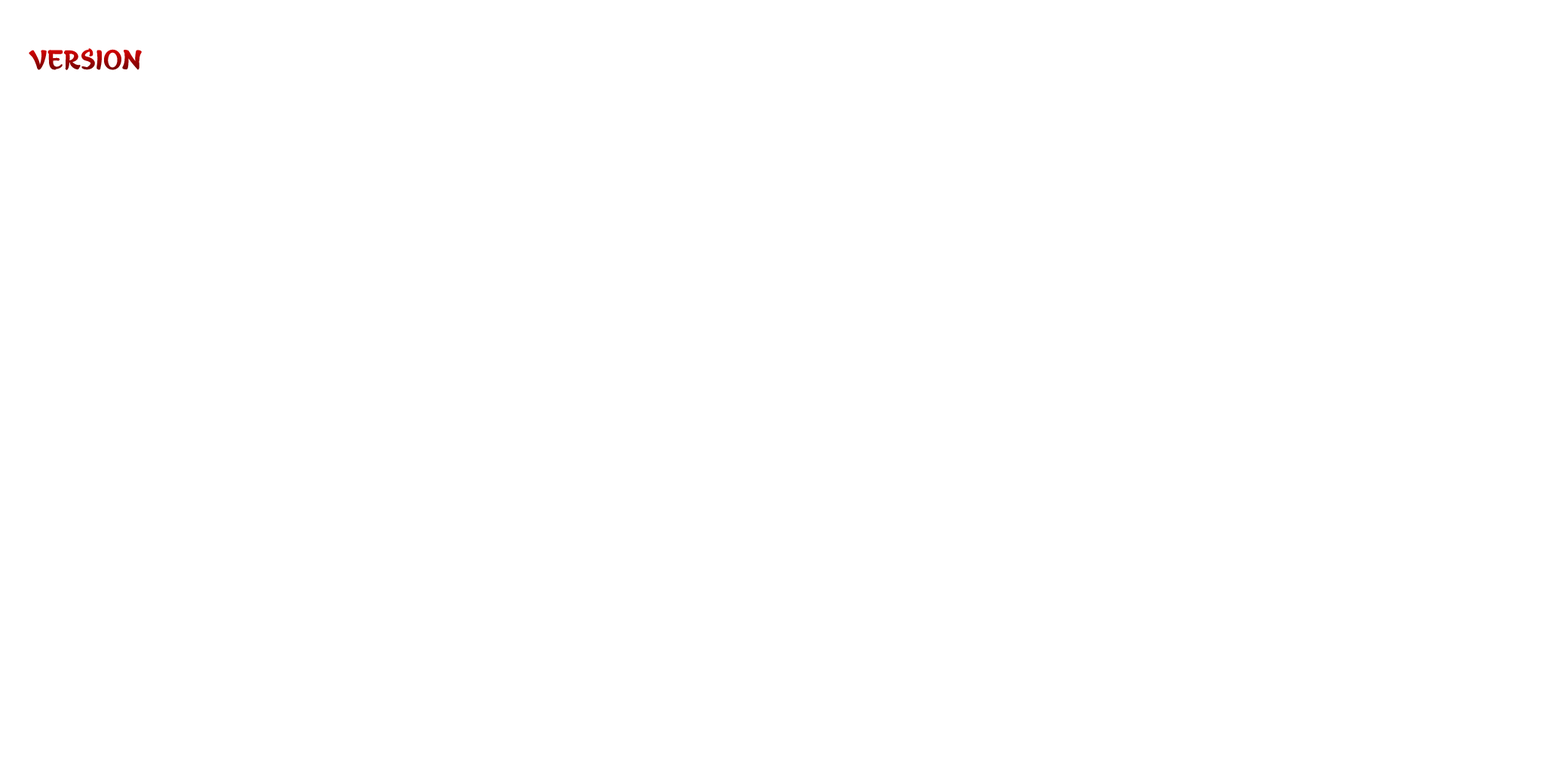
<style>
.page{position:relative;width:1544px;height:772px;background:#ffffff}
.page>*{position:absolute;margin:0}
.t1{font:38.8px "HIROMISAKERegular";letter-spacing:0.05em;font-variant:small-caps;font-weight:bold}
</style>
<div class="page">
<p class="t1" style="left:29px;top:48px;width:113px;height:22px">version</p>
</div>
